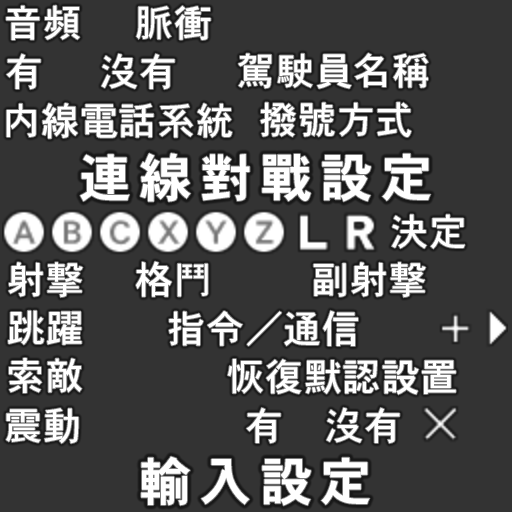
<style>
.page{position:relative;width:512px;height:512px;background:#333333}
.page>*{position:absolute;margin:0}
.t1{font:38px "HeiseiKakuGoStd-W5";letter-spacing:0.02em;color:#ffffff}
.t2{font:52px "HeiseiKakuGoStd-W7";letter-spacing:0.16em;color:#ffffff}
</style>
<div class="page">
<p class="t1" style="left:6px;top:5px;width:74px;height:35px">音頻</p>
<p class="t1" style="left:136px;top:5px;width:75px;height:35px">脈衝</p>
<p class="t1" style="left:6px;top:53px;width:35px;height:37px">有</p>
<p class="t1" style="left:101px;top:53px;width:74px;height:37px">沒有</p>
<p class="t1" style="left:238px;top:53px;width:191px;height:36px">駕駛員名稱</p>
<p class="t1" style="left:260px;top:102px;width:152px;height:35px">撥號方式</p>
<p class="t1" style="left:6px;top:103px;width:226px;height:36px">内線電話系統</p>
<p class="t2" style="left:80px;top:153px;width:351px;height:49px">連線對戰設定</p>
<p class="t1" style="left:391px;top:214px;width:74px;height:35px">決定</p>
<p class="t1" style="left:8px;top:262px;width:75px;height:36px">射撃</p>
<p class="t1" style="left:136px;top:261px;width:72px;height:36px">格鬥</p>
<p class="t1" style="left:313px;top:262px;width:113px;height:36px">副射撃</p>
<p class="t1" style="left:8px;top:310px;width:74px;height:35px">跳躍</p>
<p class="t1" style="left:169px;top:310px;width:189px;height:36px">指令/通信</p>
<p class="t1" style="left:9px;top:358px;width:73px;height:35px">索敵</p>
<p class="t1" style="left:227px;top:359px;width:229px;height:36px">恢復默認設置</p>
<p class="t1" style="left:6px;top:408px;width:73px;height:36px">震動</p>
<p class="t1" style="left:246px;top:407px;width:35px;height:37px">有</p>
<p class="t1" style="left:326px;top:407px;width:74px;height:37px">沒有</p>
<p class="t2" style="left:141px;top:456px;width:229px;height:50px">輸入設定</p>
</div>
